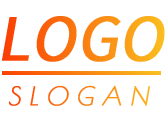
<style>
.page{position:relative;width:165px;height:120px;background:#ffffff}
.page>*{position:absolute;margin:0}
.t1{font:59.2px "NotoSansCJKsc-Regular";font-weight:bold;font-style:italic}
.t2{font:25px "PoiretOne-Regular";letter-spacing:0.3em;font-weight:bold;font-style:italic}
</style>
<div class="page">
<p class="t1" style="left:2px;top:16px;width:163px;height:46px">LOGO</p>
<p class="t2" style="left:8px;top:85px;width:142px;height:21px">SLOGAN</p>
</div>
